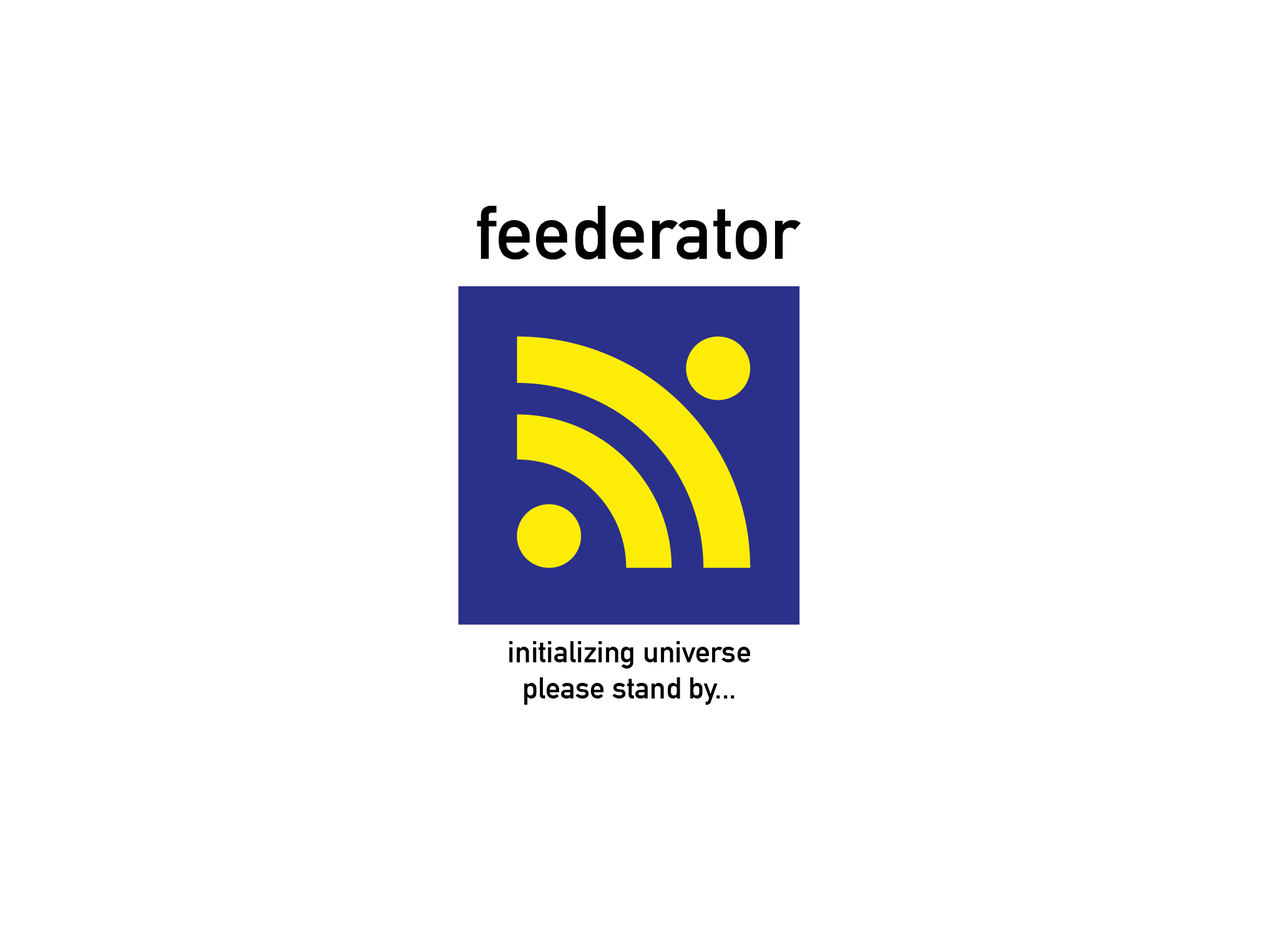
<style>
.page{position:relative;width:1278px;height:933px;background:#ffffff}
.page>*{position:absolute;margin:0}
.t1{font:74.8px "DINAlternate-Bold";color:#000000}
.t2{font:29.9px "DINAlternate-Bold";color:#000000}
</style>
<div class="page">
<p class="t1" style="left:477px;top:206px;width:323px;height:54px">feederator</p>
<p class="t2" style="left:509px;top:641px;width:241px;height:64px;text-align:center">initializing universe<br>please stand by...</p>
</div>
